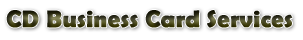
<style>
.page{position:relative;width:303px;height:40px;background:#ffffff}
.page>*{position:absolute;margin:0}
.t1{font:24px "BerlinSansFBDemi-Bold";font-weight:bold}
</style>
<div class="page">
<p class="t1" style="left:6px;top:10px;width:287px;height:18px">CD Business Card Services</p>
</div>
